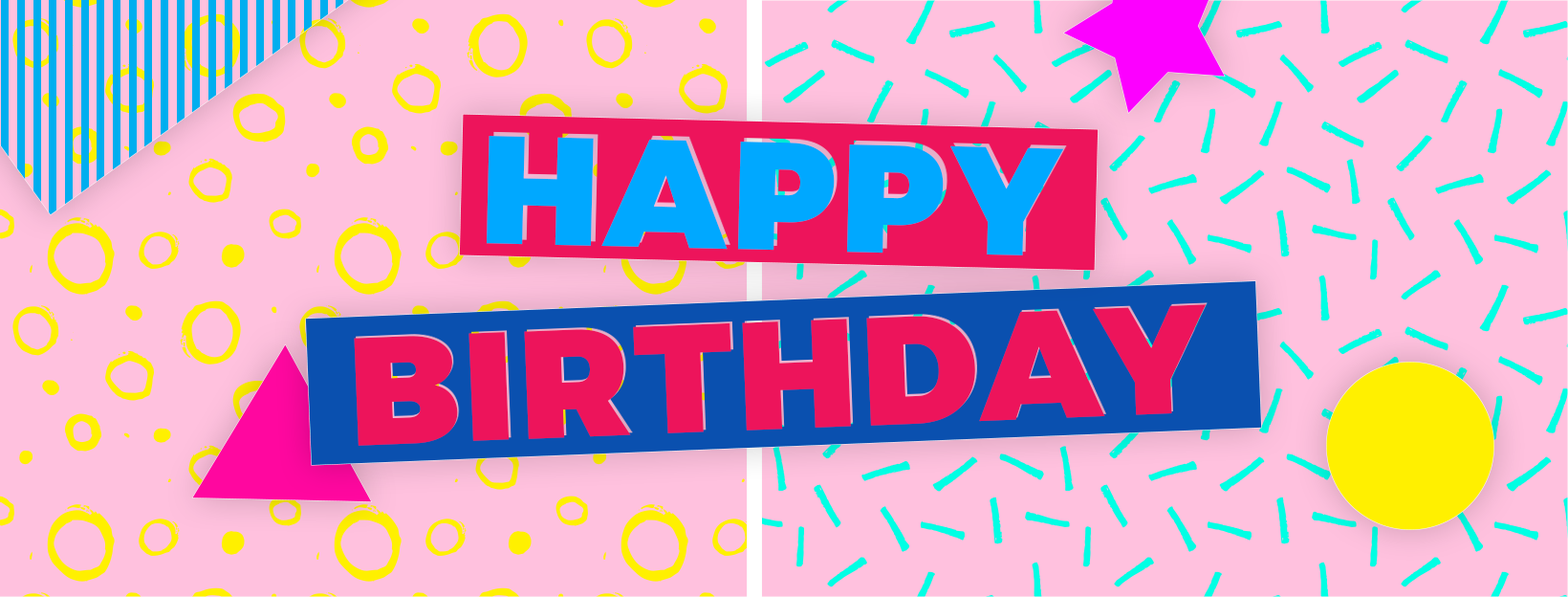
<style>
.page{position:relative;width:1568px;height:597px;background:#ffc1de}
.page>*{position:absolute;margin:0}
.t1{font:153px "Montserrat-Black";letter-spacing:0.03em;color:#00a8ff;text-transform:uppercase}
.t2{font:153px "Montserrat-Black";letter-spacing:0.03em;color:#ed145b;text-transform:uppercase}
</style>
<div class="page">
<p class="t1" style="left:486px;top:136px;width:578px;height:119px;rotate:1deg">Happy</p>
<p class="t2" style="left:354px;top:304px;width:853px;height:142px;rotate:-2deg">Birthday</p>
</div>
